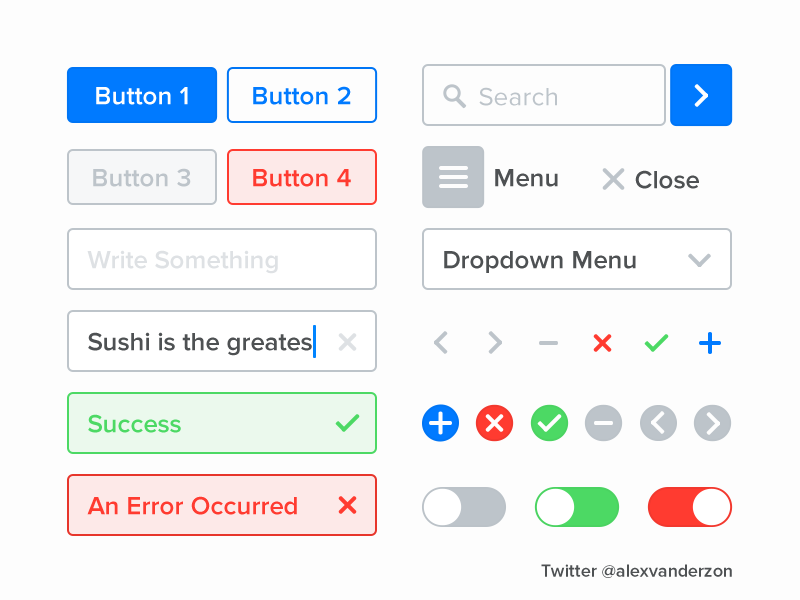
<style>
.page{position:relative;width:800px;height:600px;background:#fdfdfd}
.page>*{position:absolute;margin:0}
.t1{font:26px "ProximaNova-Semibold";color:#fefefe}
.t2{font:26px "ProximaNova-Semibold";color:#007aff}
.t3{font:26px "ProximaNova-Regular";color:#bdc4ca}
.t4{font:26px "ProximaNova-Semibold";color:#bdc4ca}
.t5{font:26px "ProximaNova-Semibold";color:#ff3b30}
.t6{font:26px "ProximaNova-Semibold";color:#4e5153}
.t7{font:26px "ProximaNova-Semibold";color:#dee1e4}
.t8{font:26px "ProximaNova-Semibold";color:#4cd964}
.t9{font:18px "ProximaNova-Semibold";color:#4e5153}
</style>
<div class="page">
<p class="t1" style="left:96px;top:87px;width:92px;height:18px">Button 1</p>
<p class="t2" style="left:253px;top:86px;width:98px;height:19px">Button 2</p>
<p class="t3" style="left:479px;top:87px;width:78px;height:19px">Search</p>
<p class="t4" style="left:93px;top:168px;width:98px;height:19px">Button 3</p>
<p class="t5" style="left:253px;top:169px;width:98px;height:18px">Button 4</p>
<p class="t6" style="left:495px;top:169px;width:63px;height:18px">Menu</p>
<p class="t6" style="left:635px;top:170px;width:64px;height:19px">Close</p>
<p class="t7" style="left:87px;top:250px;width:191px;height:24px">Write Something</p>
<p class="t6" style="left:444px;top:251px;width:192px;height:22px">Dropdown Menu</p>
<p class="t6" style="left:88px;top:332px;width:224px;height:24px">Sushi is the greates</p>
<p class="t8" style="left:88px;top:414px;width:93px;height:19px">Success</p>
<p class="t5" style="left:87px;top:496px;width:210px;height:19px">An Error Occurred</p>
<p class="t9" style="left:541px;top:564px;width:191px;height:14px">Twitter @alexvanderzon</p>
</div>
